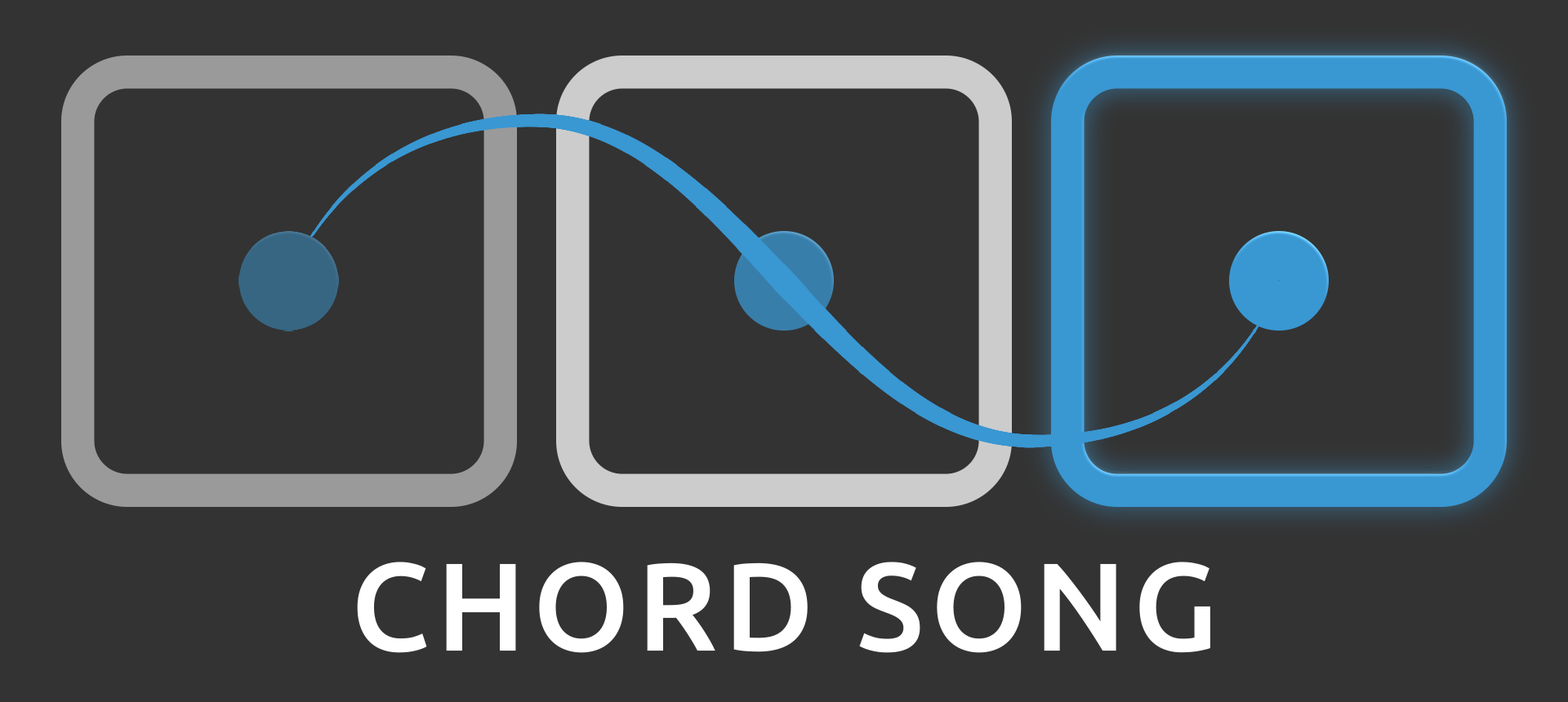
<style>
.page{position:relative;width:1568px;height:702px;background:#333333}
.page>*{position:absolute;margin:0}
.t1{font:125.2px "UbuntuNF-Med";letter-spacing:0.05em;color:#ffffff}
</style>
<div class="page">
<p class="t1" style="left:357px;top:562px;width:853px;height:91px">CHORD SONG</p>
</div>
